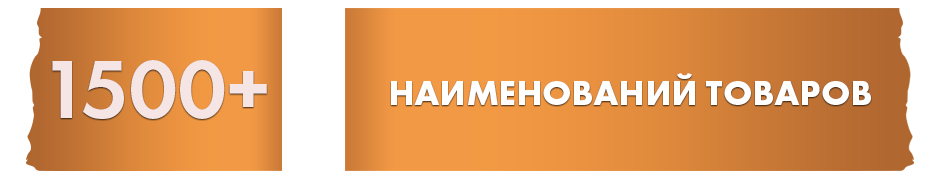
<style>
.page{position:relative;width:940px;height:178px;background:#ffffff}
.page>*{position:absolute;margin:0}
.t1{font:85.6px "FuturaPT-Demi";color:#f5e6e5;text-transform:uppercase}
.t2{font:35.7px "FuturaPT-Bold";color:#ffffff;text-transform:uppercase}
</style>
<div class="page">
<p class="t1" style="left:52px;top:60px;width:215px;height:59px">1500+</p>
<p class="t2" style="left:391px;top:73px;width:480px;height:32px">наименований товаров</p>
</div>
